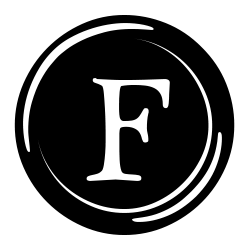
<style>
.page{position:relative;width:250px;height:250px;background:#000000}
.page>*{position:absolute;margin:0}
.t1{font:293.2px "TypeKeysFilled";letter-spacing:0.02em;color:#000000}
</style>
<div class="page">
<p class="t1" style="left:14px;top:15px;width:221px;height:220px">f</p>
</div>
